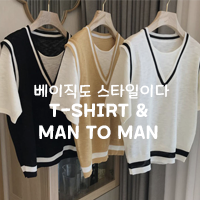
<style>
.page{position:relative;width:200px;height:200px}
.page>*{position:absolute;margin:0}
.t1{font:16px "MaplestoryLight";letter-spacing:0.05em;color:#ffffff;text-transform:uppercase}
.t2{font:18px/22px "MaplestoryBold";letter-spacing:0.05em;color:#ffffff;text-transform:uppercase}
</style>
<div class="page">
<p class="t1" style="left:34px;top:84px;width:136px;height:15px">베이직도 스타일이다</p>
<p class="t2" style="left:39px;top:103px;width:119px;height:36px;text-align:center">T-shirt &amp; <br>man to man</p>
</div>
